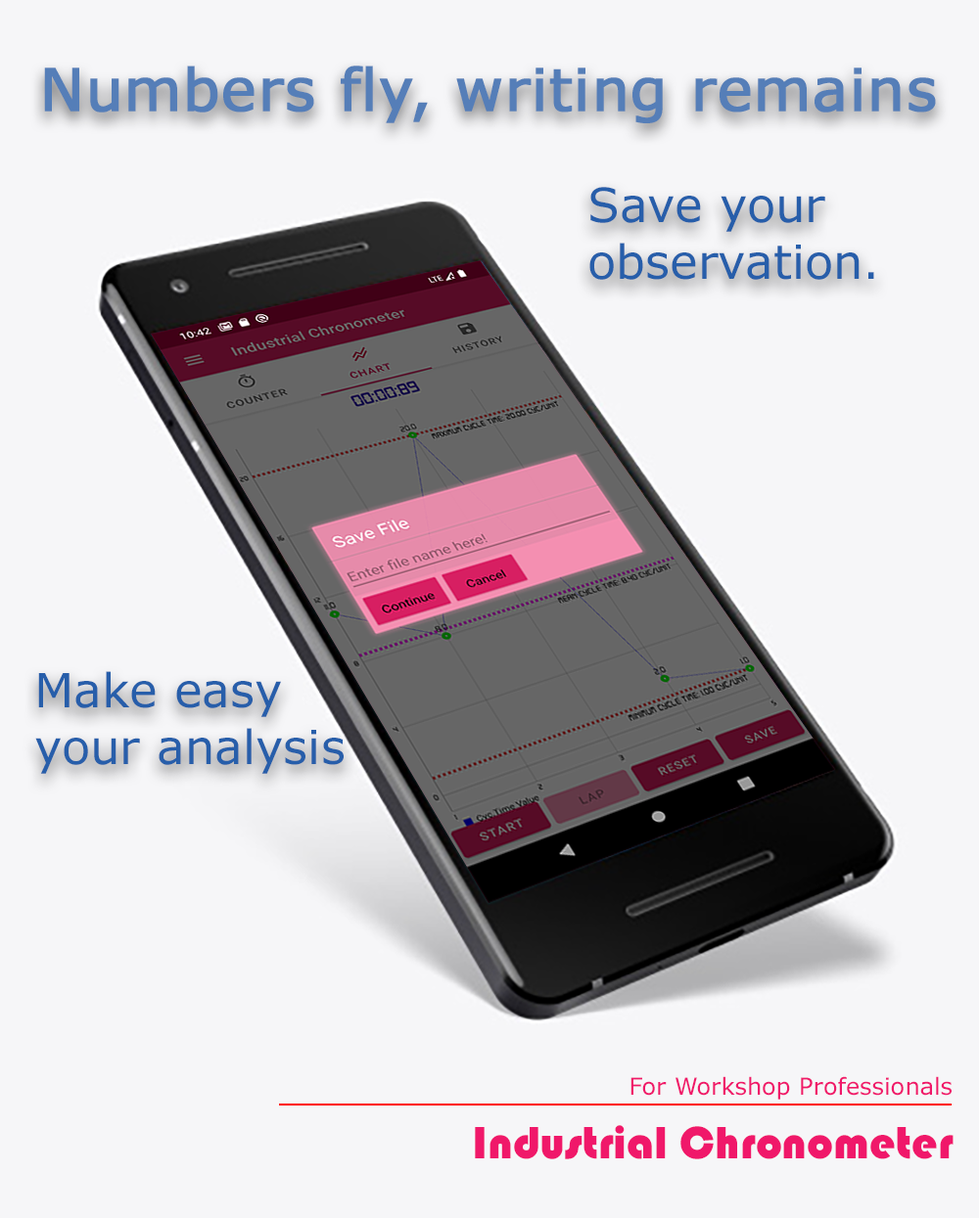
<style>
.page{position:relative;width:979px;height:1218px;background:#f6f6f8}
.page>*{position:absolute;margin:0}
.t1{font:58.7px "MSReferenceSansSerif";color:#557eb8;font-weight:bold}
.t2{font:47px "MSReferenceSansSerif";color:#275eaa}
.t3{font:23.5px "MSReferenceSansSerif";color:#f0186a}
.t4{font:47px "Bauhaus93";color:#f0186a}
</style>
<div class="page">
<p class="t1" style="left:44px;top:66px;width:892px;height:57px">Numbers fly, writing remains</p>
<p class="t2" style="left:589px;top:187px;width:285px;height:93px">Save your observation.</p>
<p class="t2" style="left:35px;top:671px;width:309px;height:103px">Make easy <br>your analysis</p>
<p class="t3" style="left:630px;top:1077px;width:321px;height:23px">For Workshop Professionals</p>
<p class="t4" style="left:475px;top:1125px;width:478px;height:35px">Industrial Chronometer</p>
</div>
